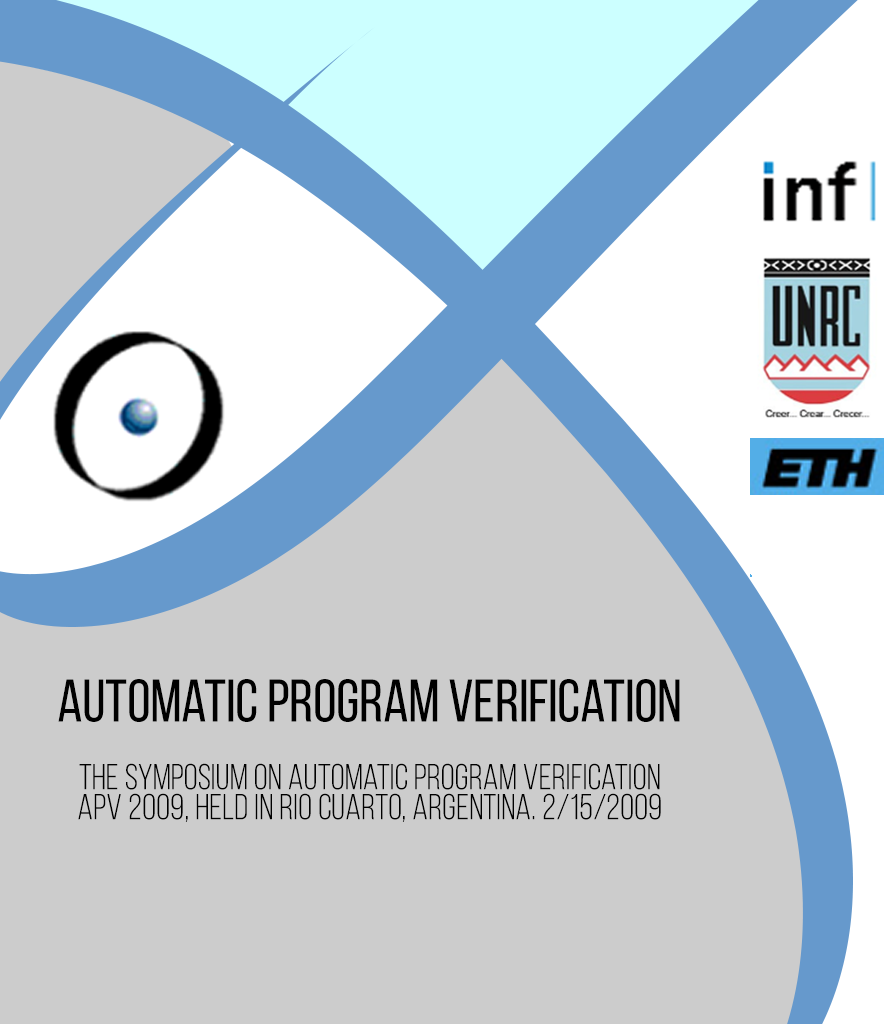
<style>
.page{position:relative;width:884px;height:1024px;background:#cccccc}
.page>*{position:absolute;margin:0}
.t1{font:60px "BebasNeueRegular";color:#000000}
.t2{font:36px "BebasNeueBook";color:#000000}
</style>
<div class="page">
<p class="t1" style="left:58px;top:679px;width:622px;height:43px">Automatic Program Verification</p>
<p class="t2" style="left:78px;top:763px;width:583px;height:59px">The Symposium on automatic program verification APV 2009, held in Rio cuarto, argentina. 2/15/2009</p>
</div>
